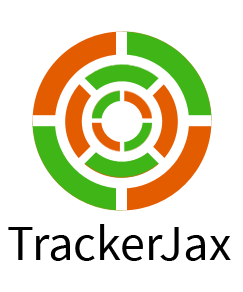
<style>
.page{position:relative;width:243px;height:292px;background:#ffffff}
.page>*{position:absolute;margin:0}
.t1{font:50px "SourceSansPro-Regular";color:#000000}
</style>
<div class="page">
<p class="t1" style="left:8px;top:224px;width:223px;height:37px">TrackerJax</p>
</div>
